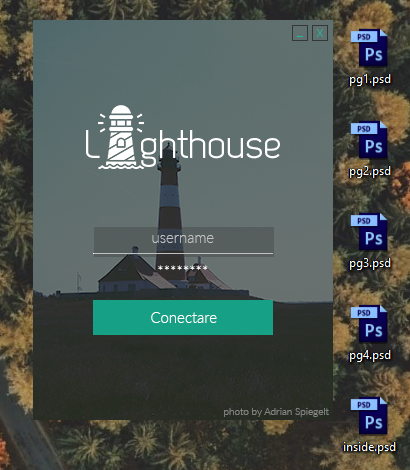
<style>
.page{position:relative;width:410px;height:470px}
.page>*{position:absolute;margin:0}
.t1{font:15px "Lato-Thin";color:#1abc9c}
.t2{font:40px "Dekar";color:#ffffff}
.t3{font:15px "Lato-Thin";color:#c1c1c1}
.t4{font:15px "Lato-Thin";color:#ffffff}
.t5{font:15px "Lato-Light";color:#ffffff}
.t6{font:10px "Lato-Light";color:#81837f}
</style>
<div class="page">
<p class="t1" style="left:316px;top:29px;width:7px;height:8px">x</p>
<p class="t1" style="left:296px;top:36px;width:7px;height:1px">_</p>
<p class="t2" style="left:86px;top:130px;width:194px;height:37px">L    ghthouse</p>
<p class="t3" style="left:152px;top:235px;width:62px;height:8px">username</p>
<p class="t4" style="left:158px;top:265px;width:50px;height:5px">********</p>
<p class="t5" style="left:151px;top:312px;width:66px;height:11px">Conectare</p>
<p class="t6" style="left:224px;top:408px;width:105px;height:9px">photo by Adrian Spiegelt</p>
</div>
